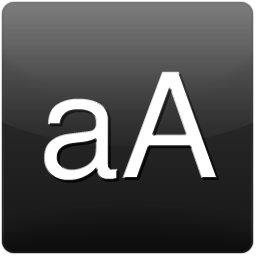
<style>
.page{position:relative;width:256px;height:256px}
.page>*{position:absolute;margin:0}
.t1{font:148.1px "Helvetica";color:#ffffff}
</style>
<div class="page">
<p class="t1" style="left:43px;top:71px;width:175px;height:110px">aA</p>
<p class="t1" style="left:45px;top:73px;width:175px;height:110px">aA</p>
</div>
